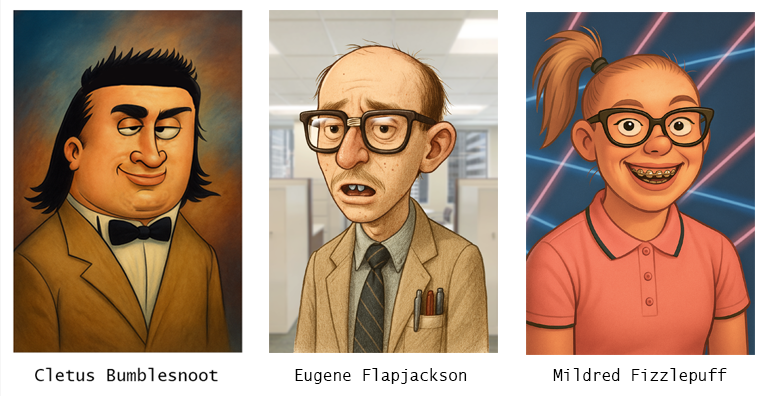
<style>
.page{position:relative;width:768px;height:396px;background:#ffffff}
.page>*{position:absolute;margin:0}
.t1{font:16px "LucidaSans-Typewriter";color:#000000}
</style>
<div class="page">
<p class="t1" style="left:295px;top:368px;width:172px;height:16px">Eugene Flapjackson</p>
<p class="t1" style="left:553px;top:368px;width:174px;height:16px">Mildred Fizzlepuff</p>
</div>
